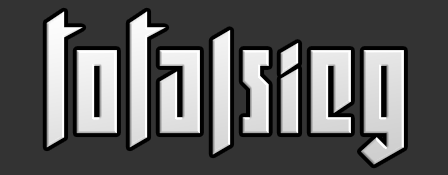
<style>
.page{position:relative;width:448px;height:175px;background:#333333}
.page>*{position:absolute;margin:0}
.t1{font:142.8px "Wolfenstein";letter-spacing:-0.075em;color:#e5e5e5}
</style>
<div class="page">
<p class="t1" style="left:46px;top:11px;width:358px;height:154px">t o t a l s i e g</p>
</div>
